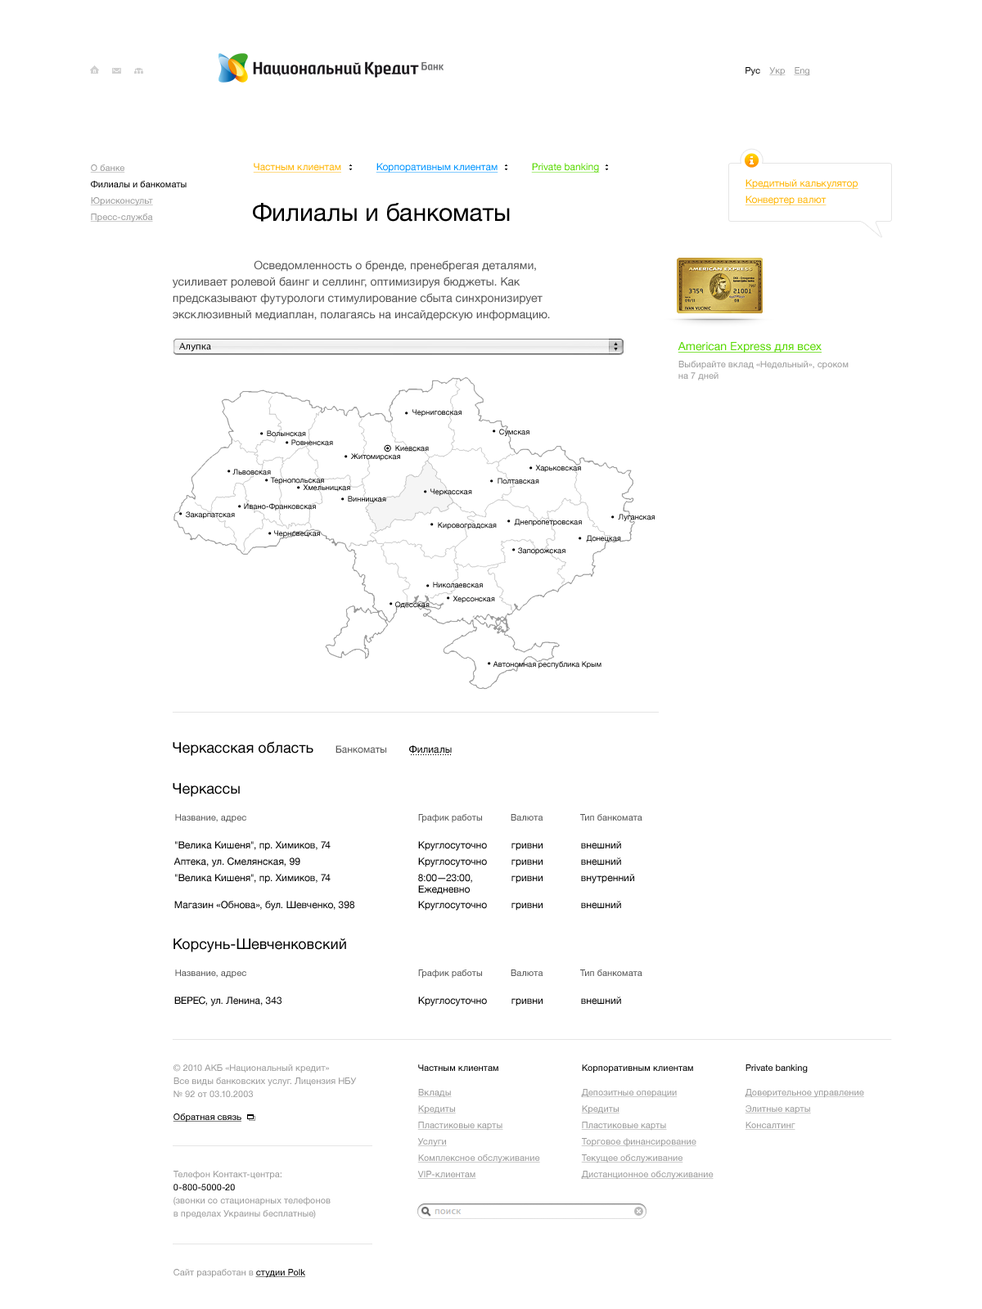
<style>
.page{position:relative;width:982px;height:1309px;background:#ffffff}
.page>*{position:absolute;margin:0}
.t1{font:9px "HelveticaNeue";color:#000000}
.t2{font:9px "HelveticaNeue";color:#999999;text-decoration:underline}
.t3{font:9.8px "HelveticaNeue";color:#ffb400;text-decoration:underline}
.t4{font:9.8px "HelveticaNeue";color:#0094ff;text-decoration:underline}
.t5{font:9.8px "HelveticaNeue";color:#57d900;text-decoration:underline}
.t6{font:24.5px "HelveticaNeue";color:#000000}
.t7{font:11.5px/16.4px "HelveticaNeue";color:#555555}
.t8{font:9px "LucidaGrande";color:#000000}
.t9{font:11.5px "HelveticaNeue";color:#57d900;text-decoration:underline}
.t10{font:9px "HelveticaNeue";color:#999999}
.t11{font:7.4px "HelveticaNeue";color:#000000}
.t12{font:7.4px "HelveticaNeue"}
.t13{font:14.7px "HelveticaNeue";color:#000000}
.t14{font:9.8px "HelveticaNeue";color:#555555}
.t15{font:9.8px "HelveticaNeue";color:#000000}
.t16{font:9px "HelveticaNeue";color:#555555}
.t17{font:9.8px "HelveticaNeue";color:#010101}
.t18{font:9px/13.1px "HelveticaNeue";color:#999999}
.t19{font:9px "HelveticaNeue";color:#000000;text-decoration:underline}
.t20{font:9px/13.1px "HelveticaNeue";color:#010101}
</style>
<div class="page">
<p class="t1" style="left:745px;top:67px;width:15px;height:9px">Рус</p>
<p class="t2" style="left:769px;top:67px;width:16px;height:9px">Укр</p>
<p class="t2" style="left:794px;top:67px;width:16px;height:9px">Eng</p>
<p class="t2" style="left:90px;top:164px;width:35px;height:9px">О банке</p>
<p class="t3" style="left:253px;top:163px;width:88px;height:10px">Частным клиентам</p>
<p class="t4" style="left:376px;top:163px;width:122px;height:10px">Корпоративным клиентам</p>
<p class="t5" style="left:531px;top:163px;width:69px;height:10px">Private banking</p>
<p class="t1" style="left:91px;top:181px;width:96px;height:7px">Филиалы и банкоматы</p>
<p class="t3" style="left:745px;top:179px;width:113px;height:10px">Кредитный калькулятор</p>
<p class="t2" style="left:90px;top:197px;width:63px;height:9px">Юрисконсульт</p>
<p class="t3" style="left:745px;top:196px;width:81px;height:9px">Конвертер валют</p>
<p class="t6" style="left:253px;top:203px;width:257px;height:19px">Филиалы и банкоматы</p>
<p class="t2" style="left:90px;top:214px;width:63px;height:9px">Пресс-служба</p>
<p class="t7" style="left:172px;top:260px;width:378px;height:61px">Осведомленность о бренде, пренебрегая деталями, <br>усиливает ролевой баинг и селлинг, оптимизируя бюджеты. Как предсказывают футурологи стимулирование сбыта синхронизирует эксклюзивный медиаплан, полагаясь на инсайдерскую информацию.</p>
<p class="t8" style="left:179px;top:343px;width:32px;height:9px">Алупка</p>
<p class="t9" style="left:677px;top:342px;width:144px;height:11px">American Express для всех</p>
<p class="t10" style="left:678px;top:361px;width:170px;height:19px">Выбирайте вклад «Недельный», сроком<br>на 7 дней</p>
<p class="t11" style="left:412px;top:409px;width:49px;height:7px">Черниговская</p>
<p class="t12" style="left:267px;top:430px;width:39px;height:7px">Волынская</p>
<p class="t12" style="left:499px;top:429px;width:30px;height:7px">Сумская</p>
<p class="t12" style="left:291px;top:439px;width:42px;height:7px">Ровненская</p>
<p class="t12" style="left:395px;top:445px;width:34px;height:7px">Киевская</p>
<p class="t12" style="left:350px;top:453px;width:50px;height:8px">Житомирская</p>
<p class="t12" style="left:232px;top:469px;width:39px;height:6px">Львовская</p>
<p class="t11" style="left:535px;top:465px;width:46px;height:7px">Харьковская</p>
<p class="t12" style="left:270px;top:477px;width:54px;height:7px">Тернопольская</p>
<p class="t11" style="left:303px;top:484px;width:47px;height:8px">Хмельницкая</p>
<p class="t12" style="left:497px;top:478px;width:42px;height:6px">Полтавская</p>
<p class="t11" style="left:348px;top:496px;width:38px;height:7px">Винницкая</p>
<p class="t12" style="left:430px;top:488px;width:42px;height:8px">Черкасская</p>
<p class="t11" style="left:244px;top:503px;width:72px;height:8px">Ивано-Франковская</p>
<p class="t11" style="left:186px;top:511px;width:49px;height:8px">Закарпатская</p>
<p class="t12" style="left:514px;top:519px;width:68px;height:7px">Днепропетровская</p>
<p class="t11" style="left:618px;top:514px;width:37px;height:7px">Луганская</p>
<p class="t12" style="left:274px;top:530px;width:46px;height:8px">Черновецкая</p>
<p class="t12" style="left:438px;top:522px;width:59px;height:7px">Кировоградская</p>
<p class="t12" style="left:586px;top:535px;width:35px;height:7px">Донецкая</p>
<p class="t12" style="left:518px;top:547px;width:47px;height:8px">Запорожская</p>
<p class="t11" style="left:433px;top:582px;width:50px;height:6px">Николаевская</p>
<p class="t11" style="left:395px;top:601px;width:35px;height:8px">Одесская</p>
<p class="t11" style="left:452px;top:596px;width:43px;height:7px">Херсонская</p>
<p class="t11" style="left:493px;top:661px;width:108px;height:7px">Автономная республика Крым</p>
<p class="t13" style="left:173px;top:741px;width:140px;height:15px">Черкасская область</p>
<p class="t14" style="left:335px;top:745px;width:51px;height:9px">Банкоматы</p>
<p class="t15" style="left:409px;top:745px;width:43px;height:9px">Филиалы</p>
<p class="t13" style="left:173px;top:783px;width:67px;height:14px">Черкассы</p>
<p class="t16" style="left:175px;top:814px;width:71px;height:9px">Название, адрес</p>
<p class="t16" style="left:418px;top:814px;width:64px;height:9px">График работы</p>
<p class="t16" style="left:511px;top:814px;width:32px;height:7px">Валюта</p>
<p class="t16" style="left:580px;top:814px;width:62px;height:7px">Тип банкомата</p>
<p class="t17" style="left:175px;top:841px;width:156px;height:10px">"Велика Кишеня", пр. Химиков, 74</p>
<p class="t17" style="left:418px;top:841px;width:69px;height:10px">Круглосуточно</p>
<p class="t17" style="left:511px;top:843px;width:31px;height:8px">гривни</p>
<p class="t17" style="left:581px;top:841px;width:40px;height:8px">внешний</p>
<p class="t17" style="left:173px;top:857px;width:127px;height:10px">Аптека, ул. Смелянская, 99</p>
<p class="t17" style="left:418px;top:857px;width:69px;height:10px">Круглосуточно</p>
<p class="t17" style="left:581px;top:857px;width:40px;height:9px">внешний</p>
<p class="t17" style="left:511px;top:859px;width:31px;height:8px">гривни</p>
<p class="t17" style="left:175px;top:874px;width:156px;height:10px">"Велика Кишеня", пр. Химиков, 74</p>
<p class="t17" style="left:418px;top:874px;width:54px;height:20px">8:00—23:00,<br>Ежедневно</p>
<p class="t17" style="left:511px;top:875px;width:31px;height:9px">гривни</p>
<p class="t17" style="left:581px;top:874px;width:53px;height:10px">внутренний</p>
<p class="t17" style="left:174px;top:901px;width:180px;height:10px">Магазин «Обнова», бул. Шевченко, 398</p>
<p class="t17" style="left:418px;top:901px;width:69px;height:10px">Круглосуточно</p>
<p class="t17" style="left:511px;top:902px;width:31px;height:9px">гривни</p>
<p class="t17" style="left:581px;top:901px;width:40px;height:8px">внешний</p>
<p class="t13" style="left:173px;top:938px;width:173px;height:14px">Корсунь-Шевченковский</p>
<p class="t16" style="left:175px;top:970px;width:71px;height:9px">Название, адрес</p>
<p class="t16" style="left:418px;top:970px;width:64px;height:9px">График работы</p>
<p class="t16" style="left:511px;top:970px;width:32px;height:6px">Валюта</p>
<p class="t16" style="left:580px;top:970px;width:62px;height:6px">Тип банкомата</p>
<p class="t17" style="left:174px;top:997px;width:107px;height:9px">ВЕРЕС, ул. Ленина, 343</p>
<p class="t17" style="left:418px;top:997px;width:69px;height:9px">Круглосуточно</p>
<p class="t17" style="left:511px;top:998px;width:31px;height:8px">гривни</p>
<p class="t17" style="left:581px;top:997px;width:40px;height:8px">внешний</p>
<p class="t18" style="left:173px;top:1064px;width:184px;height:33px">© 2010 АКБ «Национальный кредит»<br>Все виды банковских услуг. Лицензия НБУ<br>№ 92 от 03.10.2003</p>
<p class="t1" style="left:418px;top:1064px;width:80px;height:7px">Частным клиентам</p>
<p class="t1" style="left:582px;top:1064px;width:111px;height:9px">Корпоративным клиентам</p>
<p class="t1" style="left:745px;top:1064px;width:63px;height:9px">Private banking</p>
<p class="t2" style="left:417px;top:1089px;width:35px;height:8px">Вклады</p>
<p class="t2" style="left:581px;top:1089px;width:96px;height:9px">Депозитные операции</p>
<p class="t2" style="left:745px;top:1089px;width:119px;height:9px">Доверительное управление</p>
<p class="t2" style="left:417px;top:1105px;width:39px;height:9px">Кредиты</p>
<p class="t2" style="left:581px;top:1105px;width:38px;height:9px">Кредиты</p>
<p class="t2" style="left:745px;top:1105px;width:66px;height:9px">Элитные карты</p>
<p class="t19" style="left:173px;top:1114px;width:68px;height:9px">Обратная связь</p>
<p class="t2" style="left:417px;top:1122px;width:86px;height:9px">Пластиковые карты</p>
<p class="t2" style="left:581px;top:1122px;width:86px;height:9px">Пластиковые карты</p>
<p class="t2" style="left:745px;top:1122px;width:50px;height:8px">Консалтинг</p>
<p class="t2" style="left:417px;top:1138px;width:30px;height:9px">Услуги</p>
<p class="t2" style="left:581px;top:1138px;width:115px;height:9px">Торговое финансирование</p>
<p class="t2" style="left:417px;top:1154px;width:123px;height:9px">Комплексное обслуживание</p>
<p class="t2" style="left:581px;top:1154px;width:102px;height:9px">Текущее обслуживание</p>
<p class="t18" style="left:173px;top:1171px;width:158px;height:48px">Телефон Контакт-центра:<br><span class="t20">0-800-5000-20<br></span>(звонки со стационарных телефонов<br>в пределах Украины бесплатные)</p>
<p class="t2" style="left:417px;top:1171px;width:59px;height:8px">VIP-клиентам</p>
<p class="t2" style="left:581px;top:1171px;width:132px;height:9px">Дистанционное обслуживание</p>
<p class="t10" style="left:173px;top:1269px;width:132px;height:9px">Сайт разработан в <span class="t19">студии Polk</span></p>
</div>
